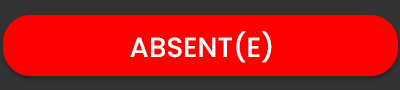
<style>
.page{position:relative;width:400px;height:90px;background:#ff0000}
.page>*{position:absolute;margin:0}
.t1{font:27.7px "Poppins-Medium";color:#ffffff}
</style>
<div class="page">
<p class="t1" style="left:130px;top:31px;width:142px;height:32px">ABSENT(E)</p>
</div>
